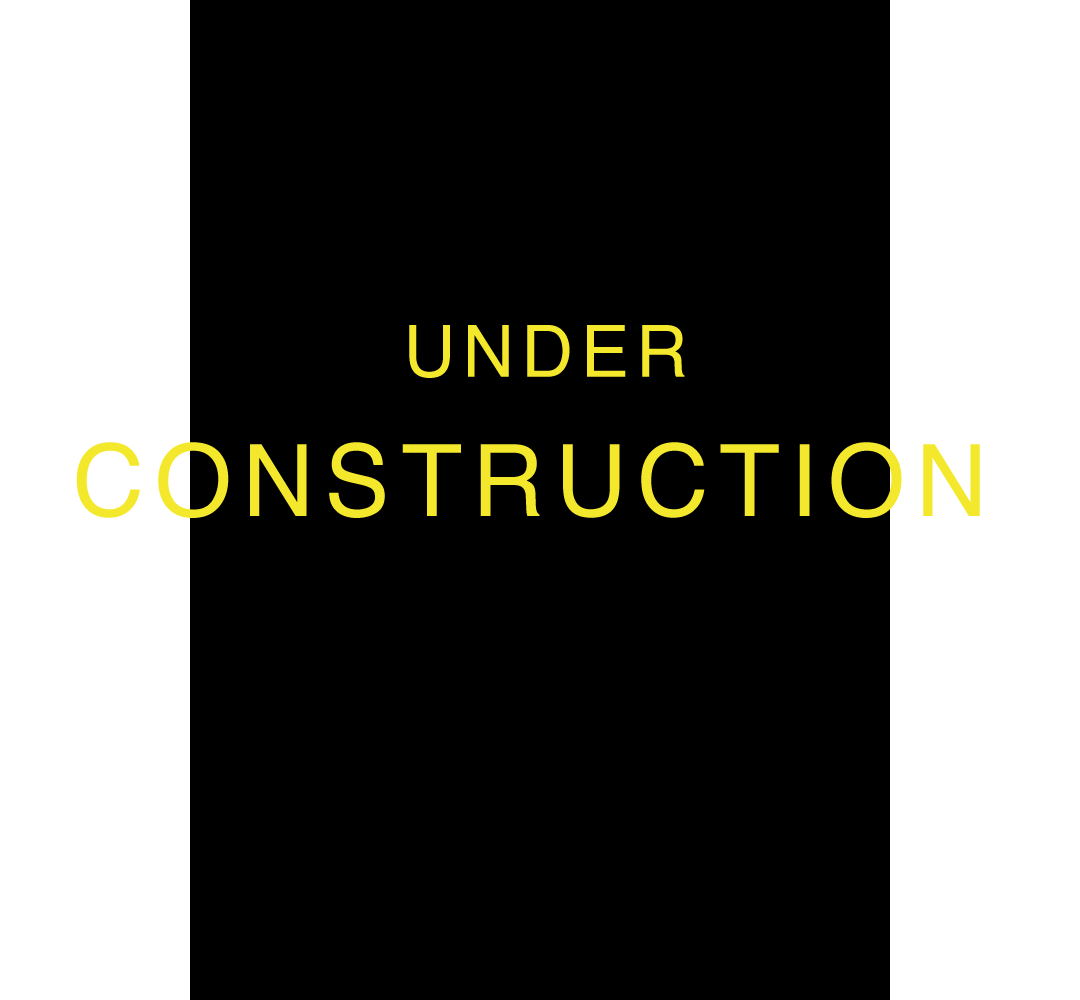
<style>
.page{position:relative;width:1080px;height:1000px;background:#000000}
.page>*{position:absolute;margin:0}
.t1{font:72px "Helvetica";letter-spacing:0.1em;color:#f4e82d}
.t2{font:100px "Helvetica";letter-spacing:0.1em;color:#f4e82d}
</style>
<div class="page">
<p class="t1" style="left:409px;top:325px;width:276px;height:53px">UNDER</p>
<p class="t2" style="left:76px;top:442px;width:904px;height:76px">CONSTRUCTION</p>
</div>
